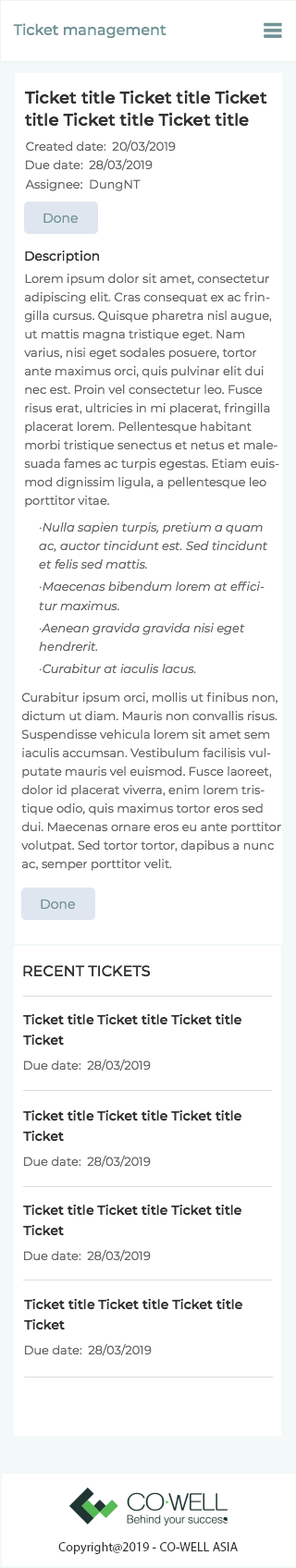
<style>
.page{position:relative;width:296px;height:1568px;background:#ffffff}
.page>*{position:absolute;margin:0}
.t1{font:14.8px "Montserrat-Medium";color:#739497}
.t2{font:16.6px/22.2px "Montserrat-SemiBold";color:#333333}
.t3{font:12px "Montserrat-Regular";color:#666666}
.t4{font:12.9px "Montserrat-Regular";color:#739497}
.t5{font:12.9px "Montserrat-Medium";color:#333333}
.t6{font:12px/18.5px "Montserrat-Regular";color:#666666}
.t7{font:12px/18.5px "Montserrat-Italic";color:#666666}
.t8{font:12px/22.2px "Montserrat-Italic";color:#666666}
.t9{font:14.8px "Montserrat-Medium";color:#333333;text-transform:uppercase}
.t10{font:12.9px/20.3px "Montserrat-SemiBold";color:#333333}
.t11{font:12.9px "MyriadPro-Regular";color:#333333}
</style>
<div class="page">
<p class="t1" style="left:13px;top:23px;width:153px;height:16px">Ticket management</p>
<p class="t2" style="left:24px;top:90px;width:243px;height:37px">Ticket title Ticket title Ticket <br>title Ticket title Ticket title</p>
<p class="t3" style="left:26px;top:140px;width:150px;height:13px">Created date:  20/03/2019</p>
<p class="t3" style="left:25px;top:158px;width:128px;height:13px">Due date:  28/03/2019</p>
<p class="t3" style="left:25px;top:179px;width:116px;height:12px">Assignee:  DungNT</p>
<p class="t4" style="left:43px;top:213px;width:35px;height:11px">Done</p>
<p class="t5" style="left:25px;top:251px;width:75px;height:12px">Description</p>
<p class="t6" style="left:24px;top:274px;width:255px;height:234px">Lorem ipsum dolor sit amet, consectetur adipiscing elit. Cras consequat ex ac fringilla cursus. Quisque pharetra nisl augue, ut mattis magna tristique eget. Nam varius, nisi eget sodales posuere, tortor ante maximus orci, quis pulvinar elit dui nec est. Proin vel consectetur leo. Fusce risus erat, ultricies in mi placerat, fringilla placerat lorem. Pellentesque habitant morbi tristique senectus et netus et malesuada fames ac turpis egestas. Etiam euismod dignissim ligula, a pellentesque leo porttitor vitae.</p>
<p class="t7" style="left:39px;top:522px;width:228px;height:152px"><span class="t8">·</span>Nulla sapien turpis, pretium a quam ac, auctor tincidunt est. Sed tincidunt et felis sed mattis. <br><span class="t8">·Maecenas bibendum lorem at effici</span>tur maximus. <br><span class="t8">·Aenean gravida gravida nisi eget </span>hendrerit. <br><span class="t8">·Curabitur at iaculis lacus.</span></p>
<p class="t6" style="left:21px;top:692px;width:260px;height:179px">Curabitur ipsum orci, mollis ut finibus non, dictum ut diam. Mauris non convallis risus. Suspendisse vehicula lorem sit amet sem iaculis accumsan. Vestibulum facilisis vulputate mauris vel euismod. Fusce laoreet, dolor id placerat viverra, enim lorem tristique odio, quis maximus tortor eros sed dui. Maecenas ornare eros eu ante porttitor volutpat. Sed tortor tortor, dapibus a nunc ac, semper porttitor velit.</p>
<p class="t4" style="left:41px;top:899px;width:34px;height:11px">Done</p>
<p class="t9" style="left:23px;top:965px;width:128px;height:12px">Recent tickets</p>
<p class="t10" style="left:23px;top:1013px;width:218px;height:33px">Ticket title Ticket title Ticket title Ticket</p>
<p class="t3" style="left:23px;top:1059px;width:128px;height:13px">Due date:  28/03/2019</p>
<p class="t10" style="left:23px;top:1109px;width:218px;height:33px">Ticket title Ticket title Ticket title Ticket</p>
<p class="t3" style="left:23px;top:1155px;width:128px;height:13px">Due date:  28/03/2019</p>
<p class="t10" style="left:23px;top:1204px;width:218px;height:32px">Ticket title Ticket title Ticket title Ticket</p>
<p class="t3" style="left:23px;top:1249px;width:128px;height:13px">Due date:  28/03/2019</p>
<p class="t10" style="left:24px;top:1298px;width:218px;height:32px">Ticket title Ticket title Ticket title Ticket</p>
<p class="t3" style="left:24px;top:1343px;width:128px;height:13px">Due date:  28/03/2019</p>
<p class="t11" style="left:58px;top:1542px;width:180px;height:12px">Copyright@2019 - CO-WELL ASIA</p>
</div>
